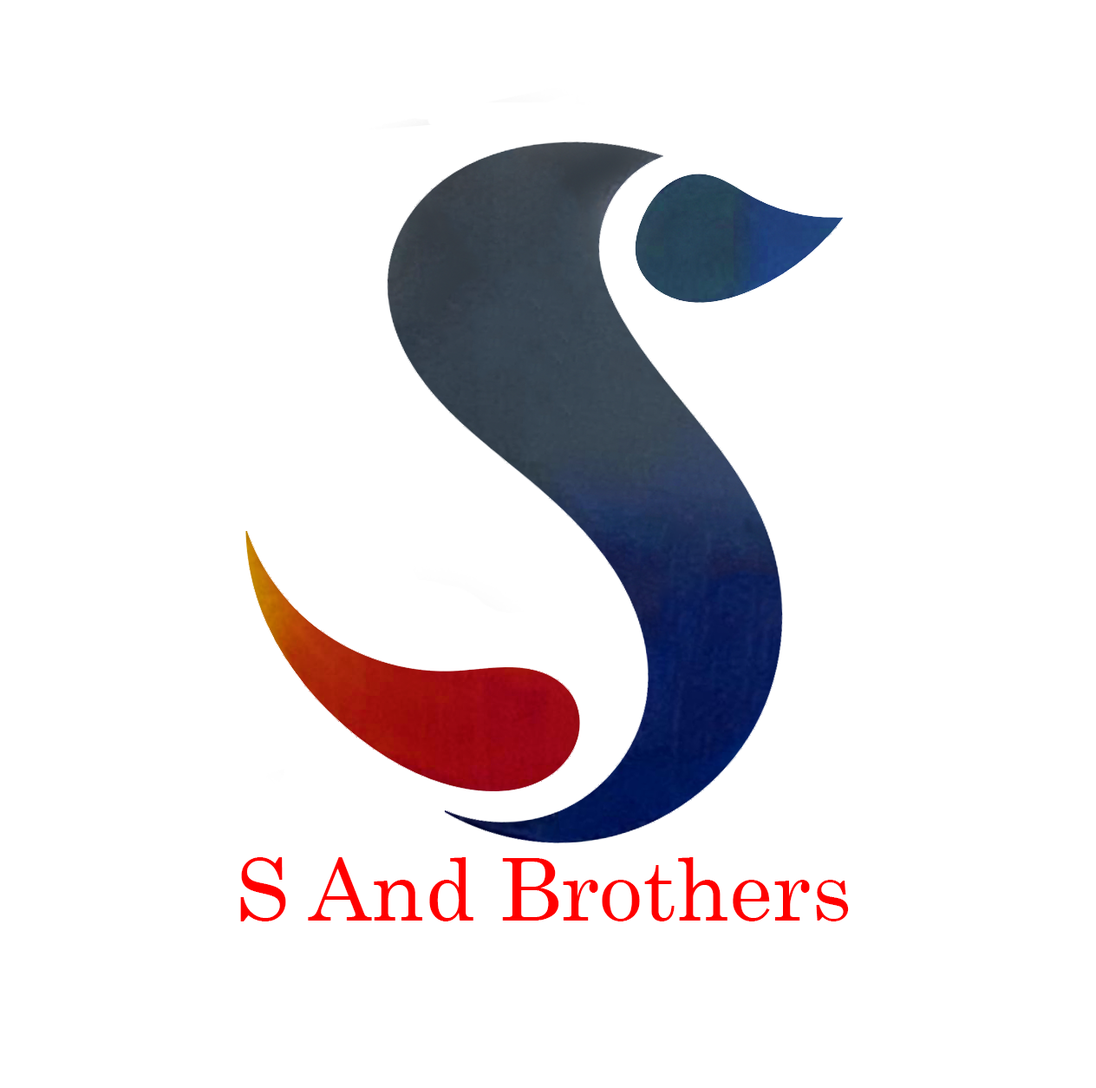
<style>
.page{position:relative;width:1096px;height:1088px;background:#ffffff}
.page>*{position:absolute;margin:0}
.t1{font:86.7px "Century";color:#ff0000}
</style>
<div class="page">
<p class="t1" style="left:240px;top:857px;width:609px;height:64px">S And Brothers</p>
</div>
